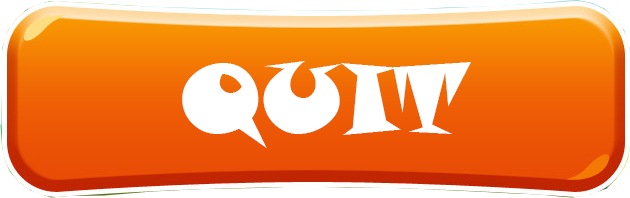
<style>
.page{position:relative;width:630px;height:198px}
.page>*{position:absolute;margin:0}
.t1{font:96.2px "SnapITC-Regular";color:#ffffff}
</style>
<div class="page">
<p class="t1" style="left:182px;top:61px;width:289px;height:87px">QUIT</p>
</div>
